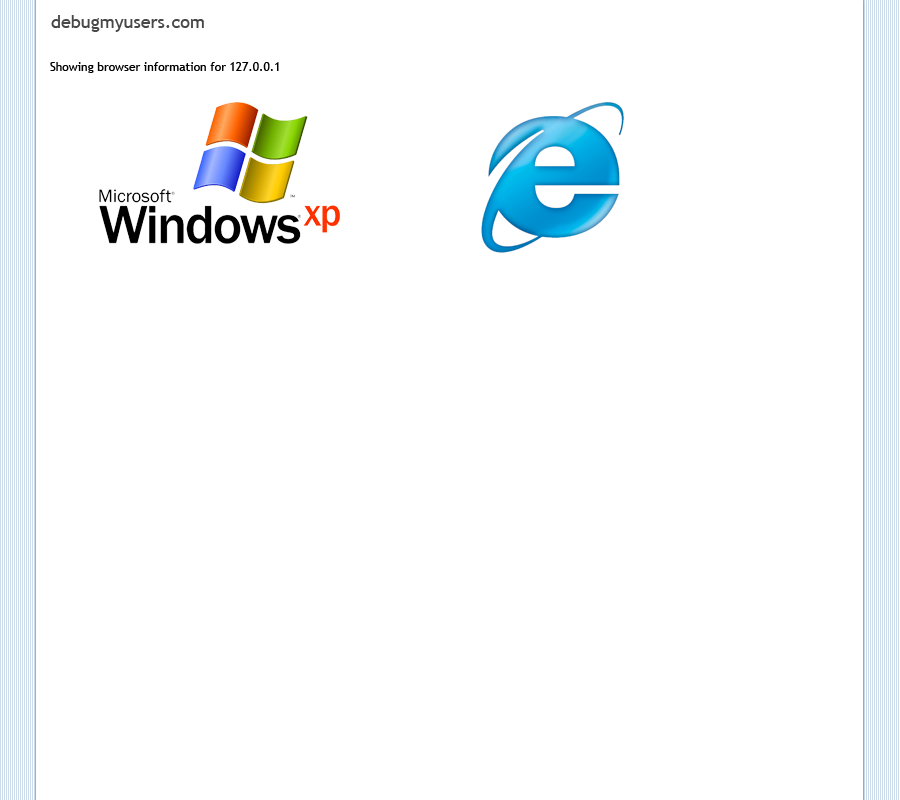
<style>
.page{position:relative;width:900px;height:800px;background:#ffffff}
.page>*{position:absolute;margin:0}
.t1{font:18px "TrebuchetMS";color:#484848}
.t2{font:12px "TrebuchetMS";color:#000000}
</style>
<div class="page">
<p class="t1" style="left:51px;top:15px;width:153px;height:17px">debugmyusers.com</p>
<p class="t2" style="left:50px;top:62px;width:229px;height:11px">Showing browser information for 127.0.0.1</p>
</div>
